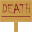
<style>
.page{position:relative;width:32px;height:32px;background:#ffffff}
.page>*{position:absolute;margin:0}
.t1{font:13.6px "Chiller-Regular";letter-spacing:-0.025em;color:#892122;text-decoration:underline;scale:1.04 1}
</style>
<div class="page">
<p class="t1" style="left:1px;top:3px;width:30px;height:14px">DEATH</p>
</div>
